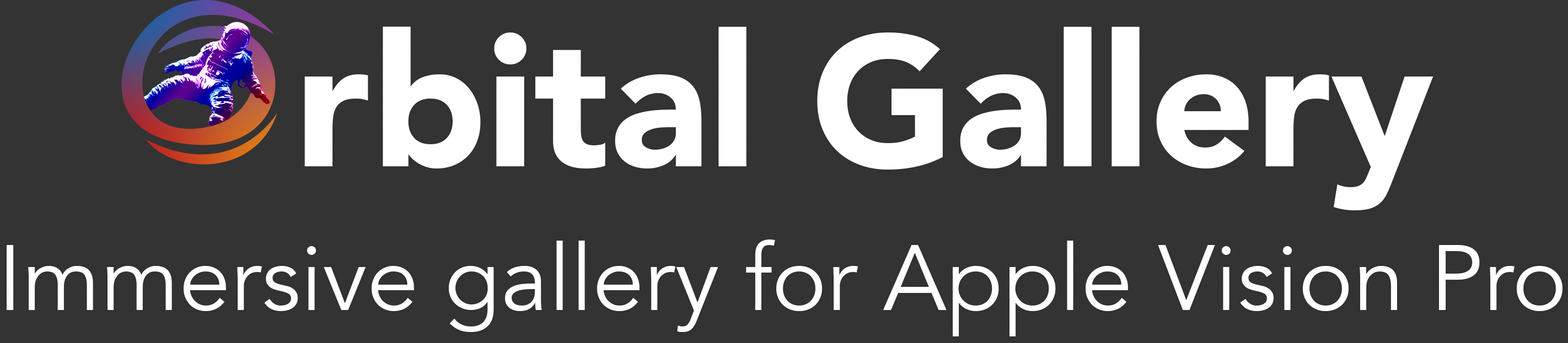
<style>
.page{position:relative;width:1568px;height:343px;background:#333333}
.page>*{position:absolute;margin:0}
.t1{font:92.3px "Avenir-Book";color:#ffffff}
.t2{font:184.5px "Avenir-Black";color:#ffffff}
</style>
<div class="page">
<p class="t1" style="left:7px;top:26px;width:1555px;height:311px;text-align:center"><span class="t2">   rbital Gallery<br><br></span>Immersive gallery for Apple Vision Pro</p>
</div>
